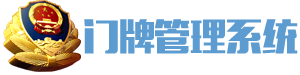
<style>
.page{position:relative;width:300px;height:75px;background:#ffffff}
.page>*{position:absolute;margin:0}
.t1{font:36px "MFLiHei_Noncommercial-Regular";color:#5c9cd1}
</style>
<div class="page">
<p class="t1" style="left:84px;top:19px;width:71px;height:35px">门牌</p>
<p class="t1" style="left:155px;top:19px;width:143px;height:35px">管理系统</p>
</div>
